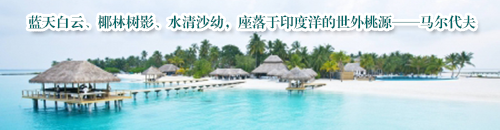
<style>
.page{position:relative;width:500px;height:130px}
.page>*{position:absolute;margin:0}
.t1{font:14px "FZXBSK--GBK1-0";color:#006666}
</style>
<div class="page">
<p class="t1" style="left:28px;top:15px;width:448px;height:14px">蓝天白云、椰林树影、水清沙幼，座落于印度洋的世外桃源——马尔代夫</p>
</div>
